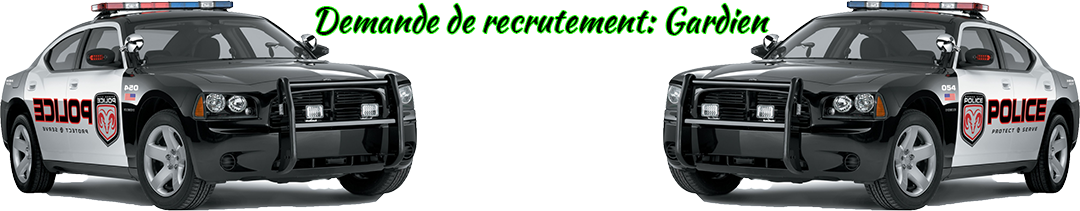
<style>
.page{position:relative;width:1080px;height:211px;background:#ffffff}
.page>*{position:absolute;margin:0}
.t1{font:33.2px "KaushanScript-Regular";color:#020202}
</style>
<div class="page">
<p class="t1" style="left:316px;top:3px;width:454px;height:32px">Demande de recrutement: Gardien</p>
</div>
